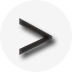
<style>
.page{position:relative;width:72px;height:72px;background:#f5f5f5}
.page>*{position:absolute;margin:0}
.t1{font:72px "MicrosoftYaHei";color:#353131}
</style>
<div class="page">
<p class="t1" style="left:19px;top:18px;width:34px;height:37px">&gt;</p>
</div>
